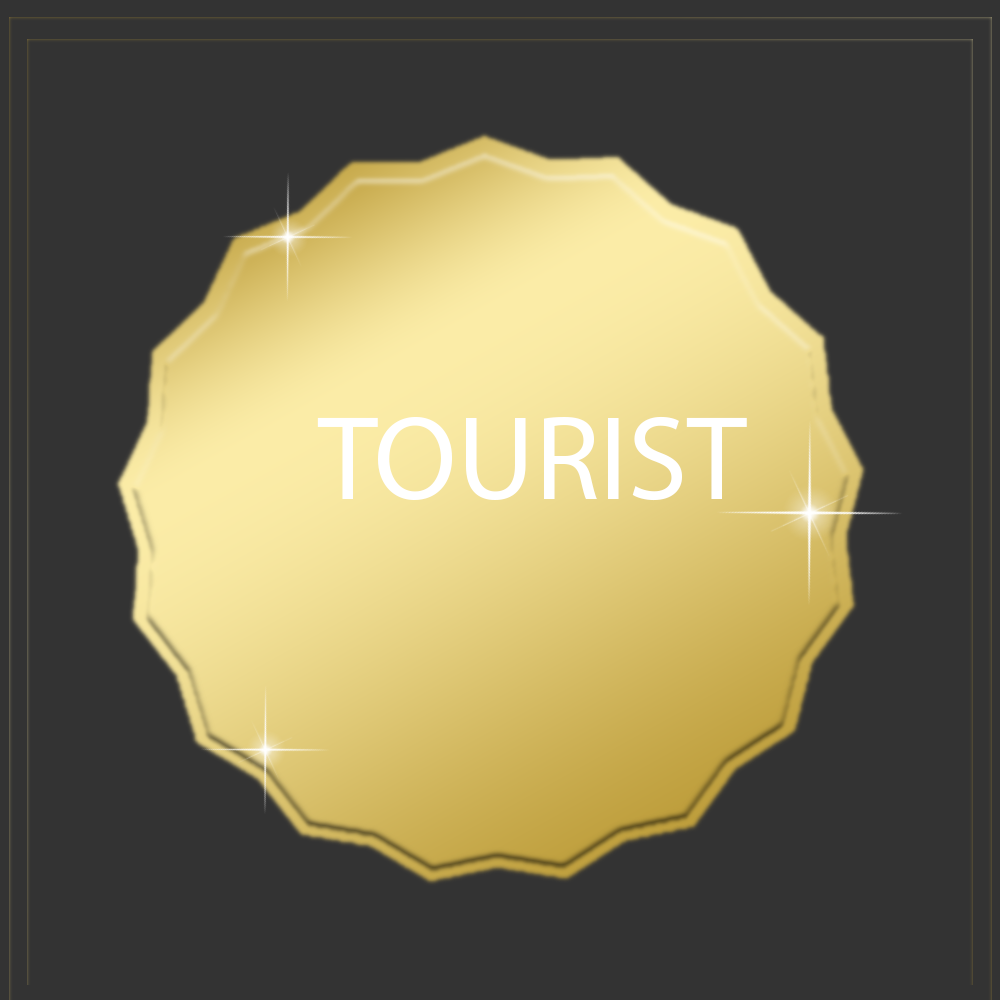
<style>
.page{position:relative;width:1000px;height:1000px;background:#333333}
.page>*{position:absolute;margin:0}
.t1{font:120px "MyriadPro-Regular";color:#ffffff}
</style>
<div class="page">
<p class="t1" style="left:317px;top:416px;width:430px;height:85px">TOURIST</p>
</div>
